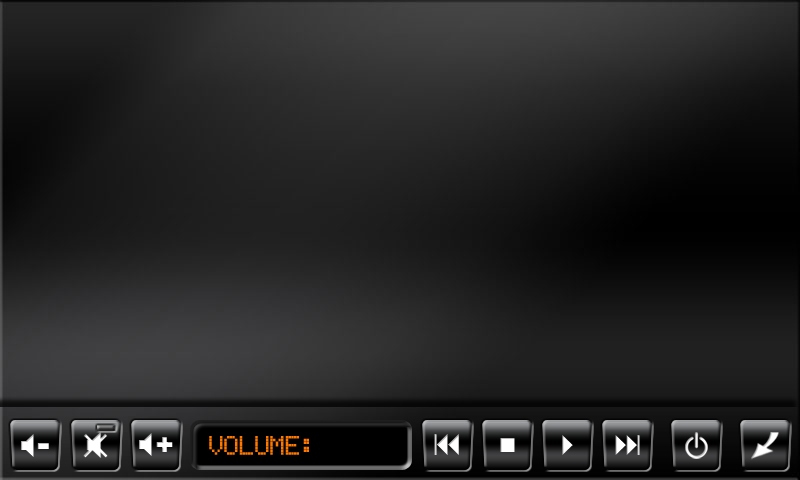
<style>
.page{position:relative;width:800px;height:480px}
.page>*{position:absolute;margin:0}
.t1{font:25px "EricssonGA628";color:#ff7800}
</style>
<div class="page">
<p class="t1" style="left:209px;top:436px;width:100px;height:19px">VOLUME:</p>
</div>
